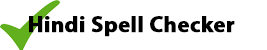
<style>
.page{position:relative;width:267px;height:50px;background:#ffffff}
.page>*{position:absolute;margin:0}
.t1{font:22.7px "MyriadPro-Bold";color:#000000;font-weight:bold}
</style>
<div class="page">
<p class="t1" style="left:29px;top:16px;width:206px;height:21px">Hindi Spell Checker</p>
</div>
